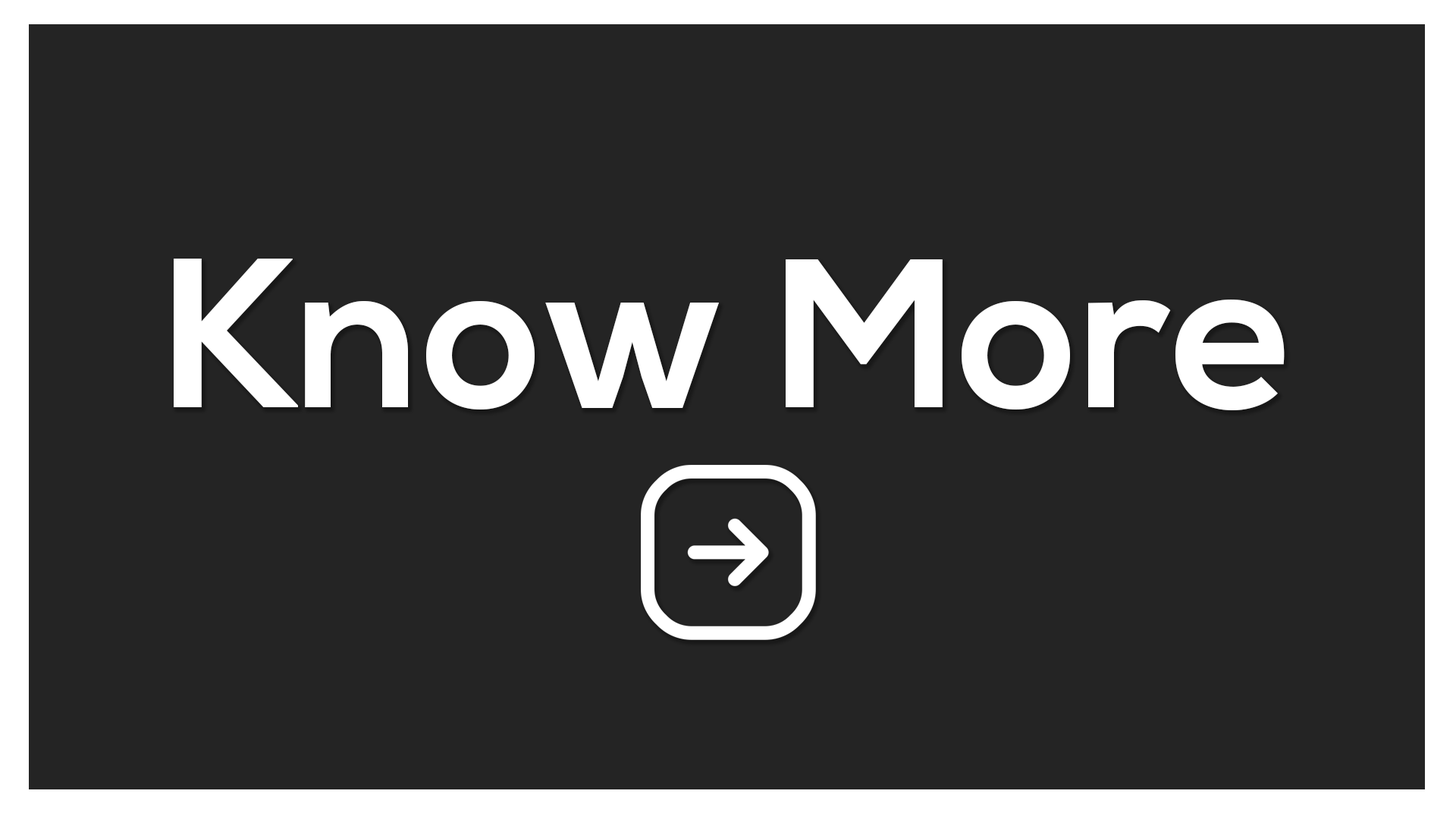
<style>
.page{position:relative;width:1456px;height:819px;background:#242424}
.page>*{position:absolute;margin:0}
.t1{font:211.6px "NexaBold";color:#ffffff}
</style>
<div class="page">
<p class="t1" style="left:174px;top:259px;width:1111px;height:151px">Know More</p>
</div>
